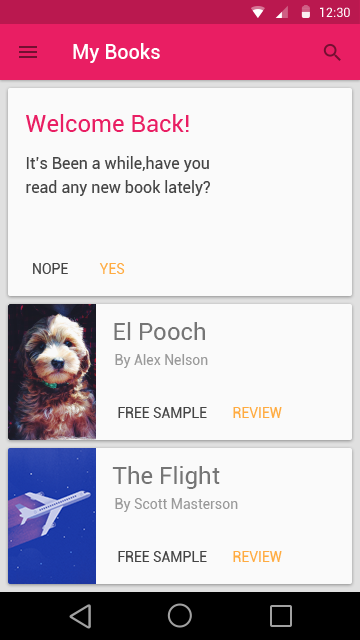
<style>
.page{position:relative;width:360px;height:640px;background:#fafafa}
.page>*{position:absolute;margin:0}
.t1{font:12.7px "Roboto-Regular";color:#ffffff}
.t2{font:20px "Roboto-Medium";color:#ffffff}
.t3{font:24px "Roboto-Regular";color:#e91e63}
.t4{font:16px/24px "Roboto-Regular";color:#444444}
.t5{font:14px "Roboto-Regular";color:#444444}
.t6{font:14px "Roboto-Regular";color:#ffab40}
.t7{font:24px "Roboto-Regular";color:#757575}
.t8{font:14px "Roboto-Regular";color:#999999}
</style>
<div class="page">
<p class="t1" style="left:320px;top:7px;width:30px;height:10px">12:30</p>
<p class="t2" style="left:73px;top:43px;width:87px;height:20px">My Books</p>
<p class="t3" style="left:26px;top:114px;width:163px;height:18px">Welcome Back!</p>
<p class="t4" style="left:26px;top:156px;width:184px;height:40px">It’s Been a while,have you<br>read any new book lately?</p>
<p class="t5" style="left:33px;top:263px;width:35px;height:11px">NOPE</p>
<p class="t6" style="left:99px;top:263px;width:26px;height:11px">YES</p>
<p class="t7" style="left:114px;top:322px;width:91px;height:18px">El Pooch</p>
<p class="t8" style="left:115px;top:354px;width:93px;height:14px">By Alex Nelson</p>
<p class="t5" style="left:118px;top:407px;width:89px;height:11px">FREE SAMPLE</p>
<p class="t6" style="left:233px;top:407px;width:49px;height:11px">REVIEW</p>
<p class="t7" style="left:112px;top:466px;width:108px;height:23px">The Flight</p>
<p class="t8" style="left:115px;top:498px;width:123px;height:14px">By Scott Masterson</p>
<p class="t5" style="left:118px;top:551px;width:89px;height:11px">FREE SAMPLE</p>
<p class="t6" style="left:233px;top:551px;width:49px;height:11px">REVIEW</p>
</div>
